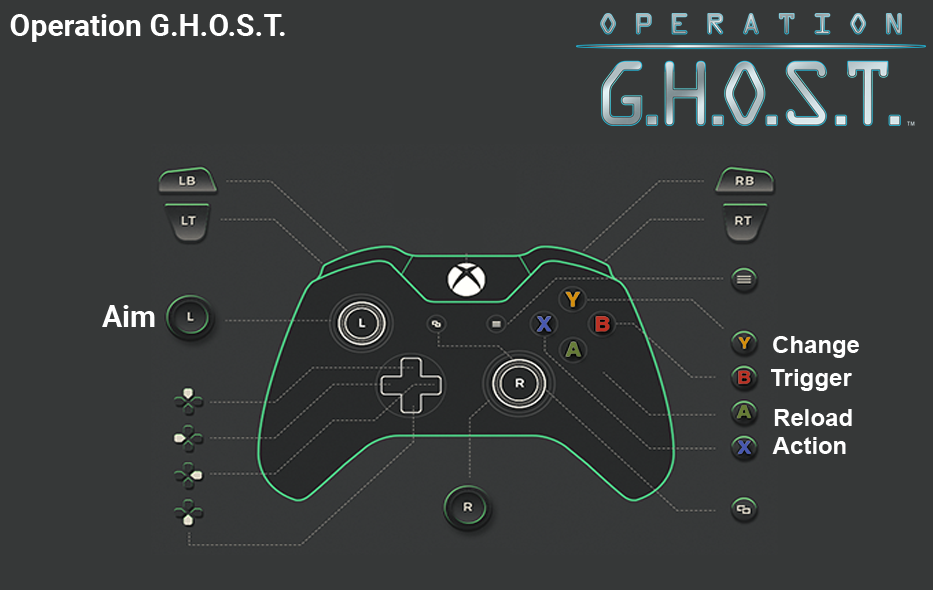
<style>
.page{position:relative;width:933px;height:590px;background:#363838}
.page>*{position:absolute;margin:0}
.t1{font:30px "Roboto-Bold";color:#ffffff}
.t2{font:30px "Roboto-Bold";color:#fefefe}
.t3{font:24px "Arial-BoldMT";color:#fefefe}
</style>
<div class="page">
<p class="t1" style="left:10px;top:14px;width:275px;height:28px">Operation G.H.O.S.T.</p>
<p class="t2" style="left:102px;top:305px;width:53px;height:22px">Aim</p>
<p class="t3" style="left:773px;top:336px;width:86px;height:22px">Change</p>
<p class="t3" style="left:771px;top:369px;width:81px;height:22px">Trigger</p>
<p class="t3" style="left:774px;top:409px;width:78px;height:17px">Reload</p>
<p class="t3" style="left:772px;top:437px;width:74px;height:17px">Action</p>
</div>
